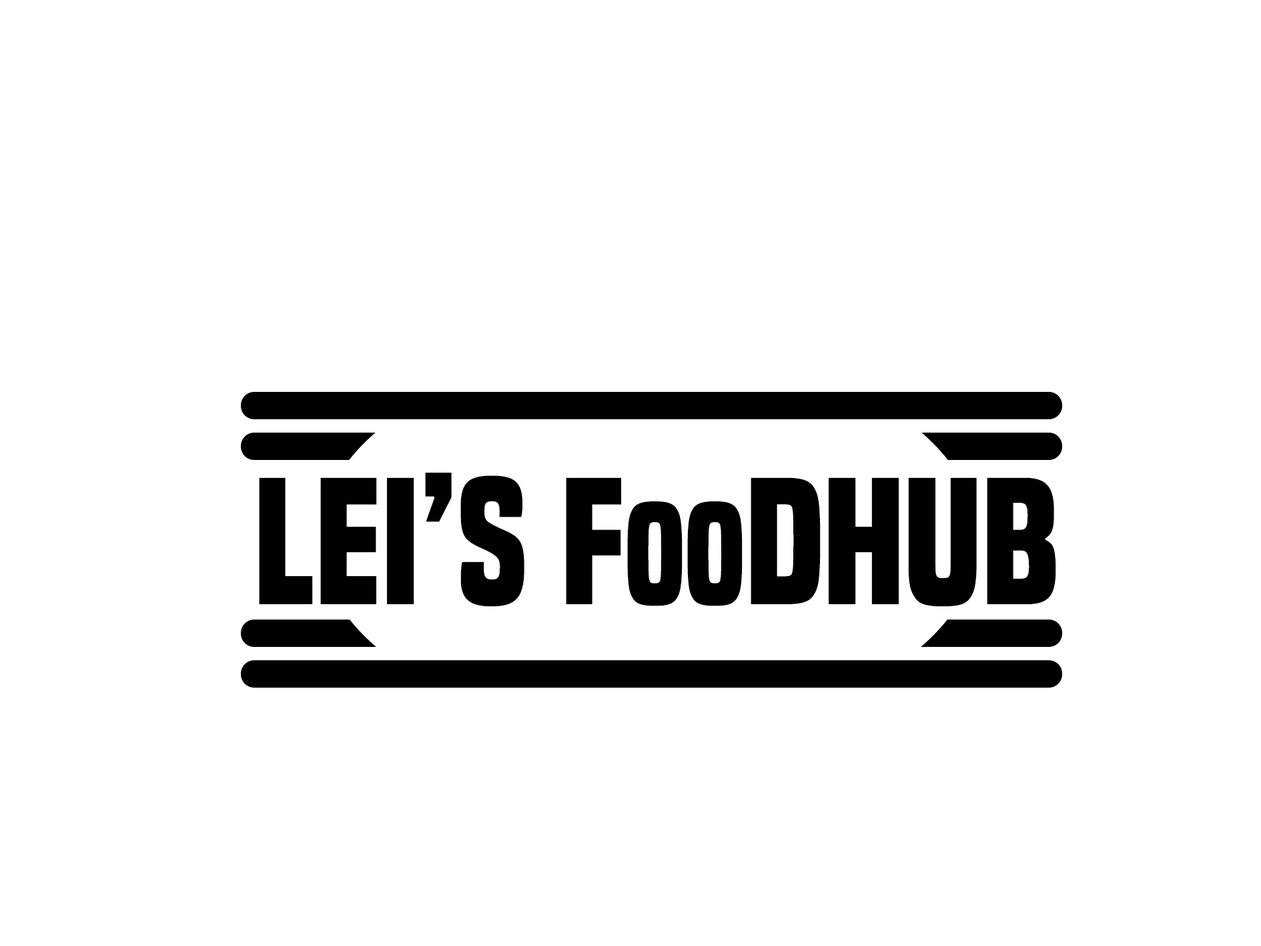
<style>
.page{position:relative;width:1261px;height:946px;background:#ffffff}
.page>*{position:absolute;margin:0}
.t1{font:166.8px "BuiltTitlingRg-Bold";color:#000000}
.t2{font:133.5px "BuiltTitlingRg-Bold";color:#000000}
</style>
<div class="page">
<p class="t1" style="left:259px;top:472px;width:797px;height:135px">lei’s F<span class="t2">oo</span>dhub</p>
</div>
